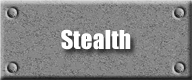
<style>
.page{position:relative;width:192px;height:80px}
.page>*{position:absolute;margin:0}
.t1{font:24px "Impact";color:#ffffff}
</style>
<div class="page">
<p class="t1" style="left:61px;top:29px;width:70px;height:21px">Stealth</p>
</div>
